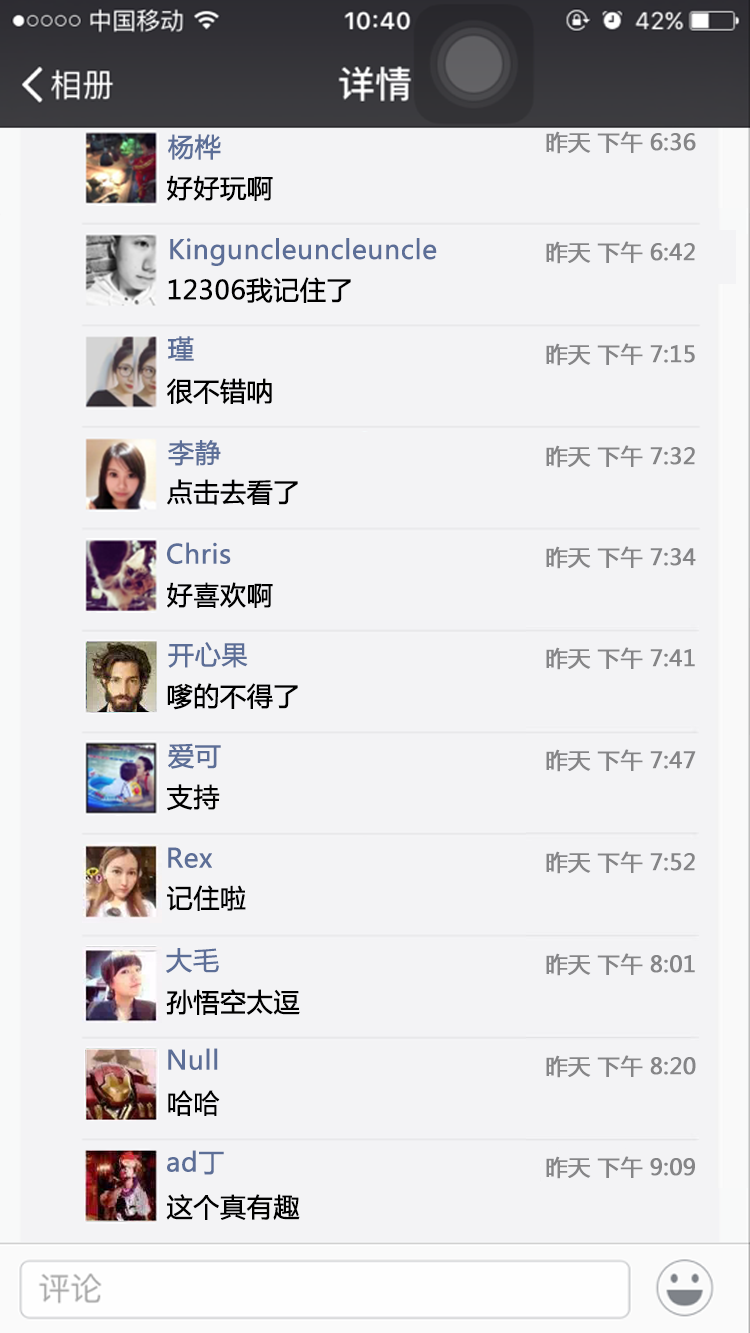
<style>
.page{position:relative;width:750px;height:1333px;background:#f3f3f5}
.page>*{position:absolute;margin:0}
.t1{font:26px "MicrosoftYaHei";color:#5c6e97;font-weight:bold}
.t2{font:22px "MicrosoftYaHei";color:#858587;font-weight:bold}
.t3{font:26px "MicrosoftYaHei";color:#000000;font-weight:bold}
</style>
<div class="page">
<p class="t1" style="left:168px;top:134px;width:53px;height:26px">杨桦</p>
<p class="t2" style="left:546px;top:131px;width:150px;height:23px">昨天 下午 6:36</p>
<p class="t3" style="left:167px;top:175px;width:106px;height:26px">好好玩啊</p>
<p class="t1" style="left:170px;top:238px;width:267px;height:28px">Kinguncleuncleuncle</p>
<p class="t2" style="left:546px;top:241px;width:149px;height:23px">昨天 下午 6:42</p>
<p class="t3" style="left:168px;top:277px;width:183px;height:26px">12306我记住了</p>
<p class="t1" style="left:168px;top:336px;width:26px;height:25px">瑾</p>
<p class="t2" style="left:546px;top:343px;width:149px;height:23px">昨天 下午 7:15</p>
<p class="t3" style="left:167px;top:378px;width:105px;height:26px">很不错呐</p>
<p class="t1" style="left:168px;top:440px;width:53px;height:26px">李静</p>
<p class="t2" style="left:546px;top:445px;width:149px;height:23px">昨天 下午 7:32</p>
<p class="t3" style="left:167px;top:479px;width:131px;height:26px">点击去看了</p>
<p class="t1" style="left:167px;top:542px;width:64px;height:22px">Chris</p>
<p class="t2" style="left:546px;top:546px;width:150px;height:23px">昨天 下午 7:34</p>
<p class="t3" style="left:167px;top:582px;width:106px;height:26px">好喜欢啊</p>
<p class="t1" style="left:168px;top:642px;width:80px;height:26px">开心果</p>
<p class="t2" style="left:546px;top:647px;width:149px;height:23px">昨天 下午 7:41</p>
<p class="t3" style="left:167px;top:683px;width:131px;height:27px">嗲的不得了</p>
<p class="t1" style="left:168px;top:743px;width:53px;height:26px">爱可</p>
<p class="t2" style="left:546px;top:749px;width:150px;height:23px">昨天 下午 7:47</p>
<p class="t3" style="left:167px;top:784px;width:53px;height:27px">支持</p>
<p class="t1" style="left:168px;top:847px;width:44px;height:21px">Rex</p>
<p class="t2" style="left:546px;top:851px;width:149px;height:23px">昨天 下午 7:52</p>
<p class="t3" style="left:167px;top:885px;width:79px;height:26px">记住啦</p>
<p class="t1" style="left:166px;top:948px;width:53px;height:25px">大毛</p>
<p class="t2" style="left:546px;top:953px;width:149px;height:23px">昨天 下午 8:01</p>
<p class="t3" style="left:166px;top:989px;width:134px;height:26px">孙悟空太逗</p>
<p class="t1" style="left:168px;top:1048px;width:50px;height:22px">Null</p>
<p class="t2" style="left:546px;top:1055px;width:150px;height:23px">昨天 下午 8:20</p>
<p class="t3" style="left:168px;top:1090px;width:52px;height:26px">哈哈</p>
<p class="t1" style="left:167px;top:1150px;width:57px;height:25px">ad丁</p>
<p class="t2" style="left:546px;top:1156px;width:149px;height:23px">昨天 下午 9:09</p>
<p class="t3" style="left:166px;top:1194px;width:134px;height:26px">这个真有趣</p>
</div>
